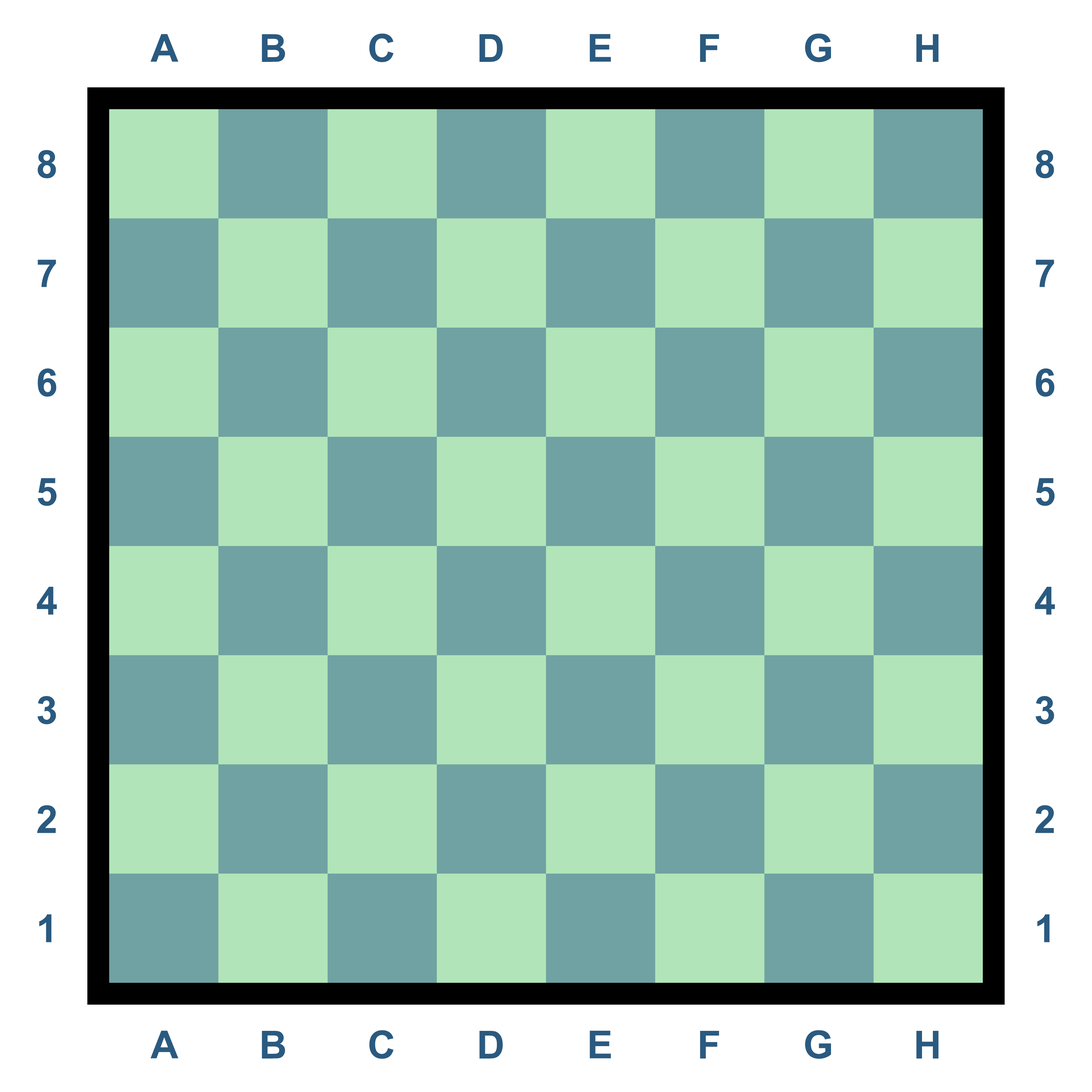
<style>
.page{position:relative;width:1092px;height:1092px;background:#b1e4b8}
.page>*{position:absolute;margin:0}
.t1{font:38.5px "Arial-BoldMT";color:#2a5a80}
</style>
<div class="page">
<p class="t1" style="left:150px;top:34px;width:28px;height:28px">A</p>
<p class="t1" style="left:262px;top:34px;width:23px;height:28px">B</p>
<p class="t1" style="left:369px;top:33px;width:24px;height:29px">C</p>
<p class="t1" style="left:479px;top:34px;width:24px;height:28px">D</p>
<p class="t1" style="left:590px;top:34px;width:21px;height:28px">E</p>
<p class="t1" style="left:700px;top:34px;width:19px;height:28px">F</p>
<p class="t1" style="left:805px;top:33px;width:26px;height:29px">G</p>
<p class="t1" style="left:916px;top:34px;width:23px;height:28px">H</p>
<p class="t1" style="left:37px;top:150px;width:19px;height:28px">8</p>
<p class="t1" style="left:1036px;top:150px;width:18px;height:28px">8</p>
<p class="t1" style="left:37px;top:260px;width:19px;height:27px">7</p>
<p class="t1" style="left:1036px;top:260px;width:18px;height:27px">7</p>
<p class="t1" style="left:37px;top:368px;width:19px;height:29px">6</p>
<p class="t1" style="left:1036px;top:368px;width:18px;height:29px">6</p>
<p class="t1" style="left:38px;top:478px;width:19px;height:28px">5</p>
<p class="t1" style="left:1036px;top:478px;width:19px;height:28px">5</p>
<p class="t1" style="left:37px;top:587px;width:20px;height:28px">4</p>
<p class="t1" style="left:1035px;top:587px;width:20px;height:28px">4</p>
<p class="t1" style="left:37px;top:696px;width:19px;height:28px">3</p>
<p class="t1" style="left:1036px;top:696px;width:18px;height:28px">3</p>
<p class="t1" style="left:37px;top:805px;width:19px;height:28px">2</p>
<p class="t1" style="left:1035px;top:805px;width:19px;height:28px">2</p>
<p class="t1" style="left:39px;top:914px;width:13px;height:28px">1</p>
<p class="t1" style="left:1037px;top:914px;width:13px;height:28px">1</p>
<p class="t1" style="left:150px;top:1030px;width:28px;height:28px">A</p>
<p class="t1" style="left:262px;top:1031px;width:23px;height:27px">B</p>
<p class="t1" style="left:369px;top:1030px;width:24px;height:29px">C</p>
<p class="t1" style="left:479px;top:1031px;width:24px;height:27px">D</p>
<p class="t1" style="left:590px;top:1030px;width:21px;height:28px">E</p>
<p class="t1" style="left:700px;top:1031px;width:19px;height:27px">F</p>
<p class="t1" style="left:805px;top:1030px;width:26px;height:29px">G</p>
<p class="t1" style="left:916px;top:1031px;width:23px;height:27px">H</p>
</div>
